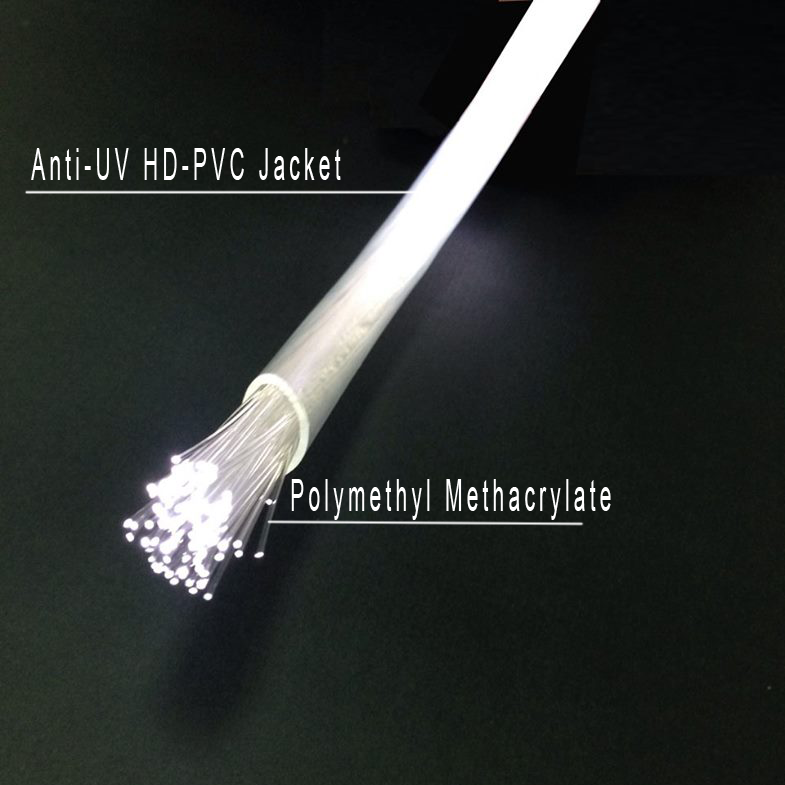
<style>
.page{position:relative;width:785px;height:785px}
.page>*{position:absolute;margin:0}
.t1{font:45px "ArialMT";letter-spacing:0.2em;color:#ffffff;scale:0.47 1}
</style>
<div class="page">
<p class="t1" style="left:31px;top:148px;width:310px;height:32px">Anti-UV HD-PVC Jacket</p>
<p class="t1" style="left:291px;top:479px;width:320px;height:41px">Polymethyl Methacrylate</p>
</div>
